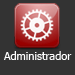
<style>
.page{position:relative;width:75px;height:75px;background:#333333}
.page>*{position:absolute;margin:0}
.t1{font:11px "Tahoma";color:#ffffff}
</style>
<div class="page">
<p class="t1" style="left:4px;top:51px;width:68px;height:9px">Administrador</p>
</div>
